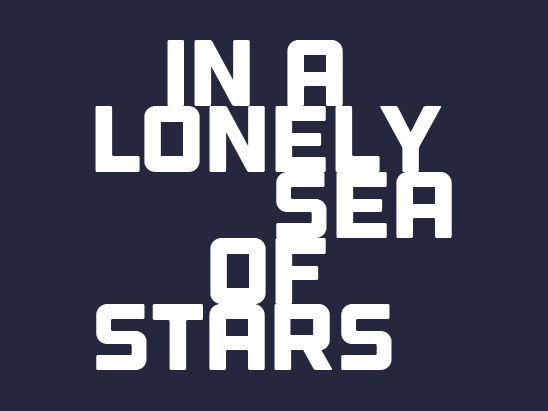
<style>
.page{position:relative;width:548px;height:411px;background:#24273d}
.page>*{position:absolute;margin:0}
.t1{font:94.2px "Outage-Regular";letter-spacing:-0.05em;color:#ffffff}
</style>
<div class="page">
<p class="t1" style="left:167px;top:40px;width:176px;height:66px">in a</p>
<p class="t1" style="left:95px;top:106px;width:347px;height:66px">lonely</p>
<p class="t1" style="left:276px;top:172px;width:176px;height:66px">sea</p>
<p class="t1" style="left:210px;top:238px;width:116px;height:66px">of</p>
<p class="t1" style="left:96px;top:304px;width:296px;height:66px">stars</p>
</div>
